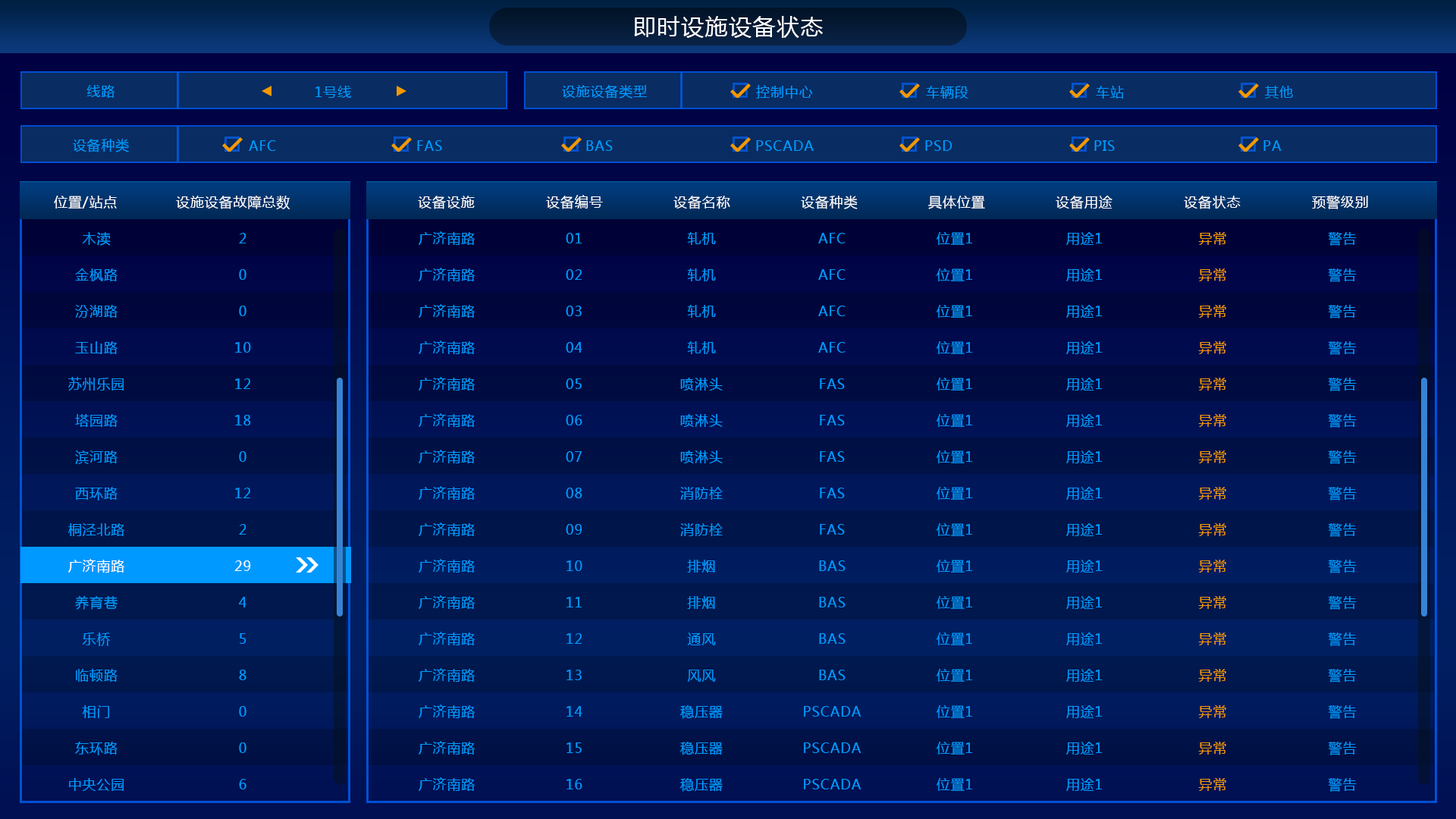
<style>
.page{position:relative;width:1456px;height:819px}
.page>*{position:absolute;margin:0}
.t1{font:22.7px "MicrosoftYaHei";letter-spacing:0.05em;color:#ffffff}
.t2{font:13.6px "MicrosoftYaHei";letter-spacing:0.05em;color:#0099ff}
.t3{font:13.6px "MicrosoftYaHei";letter-spacing:0.05em;color:#ffffff}
.t4{font:13.6px/36.4px "MicrosoftYaHei";letter-spacing:0.05em;color:#0099ff}
.t5{font:13.6px/36.4px "MicrosoftYaHei";letter-spacing:0.05em;color:#ffffff}
.t6{font:13.6px/36.4px "MicrosoftYaHei";letter-spacing:0.05em;color:#f39800}
</style>
<div class="page">
<p class="t1" style="left:634px;top:16px;width:189px;height:22px">即时设施设备状态</p>
<p class="t2" style="left:86px;top:85px;width:29px;height:13px">线路</p>
<p class="t2" style="left:315px;top:86px;width:36px;height:12px">1号线</p>
<p class="t2" style="left:562px;top:85px;width:85px;height:14px">设施设备类型</p>
<p class="t2" style="left:756px;top:85px;width:57px;height:14px">控制中心</p>
<p class="t2" style="left:926px;top:86px;width:42px;height:13px">车辆段</p>
<p class="t2" style="left:1096px;top:86px;width:28px;height:13px">车站</p>
<p class="t2" style="left:1265px;top:86px;width:28px;height:13px">其他</p>
<p class="t2" style="left:73px;top:139px;width:56px;height:13px">设备种类</p>
<p class="t2" style="left:249px;top:140px;width:27px;height:11px">AFC</p>
<p class="t2" style="left:417px;top:140px;width:25px;height:11px">FAS</p>
<p class="t2" style="left:586px;top:140px;width:27px;height:11px">BAS</p>
<p class="t2" style="left:756px;top:140px;width:58px;height:11px">PSCADA</p>
<p class="t2" style="left:925px;top:140px;width:27px;height:11px">PSD</p>
<p class="t2" style="left:1094px;top:140px;width:21px;height:11px">PIS</p>
<p class="t2" style="left:1263px;top:140px;width:19px;height:11px">PA</p>
<p class="t3" style="left:54px;top:196px;width:63px;height:13px">位置/站点</p>
<p class="t3" style="left:176px;top:195px;width:114px;height:14px">设施设备故障总数</p>
<p class="t3" style="left:418px;top:196px;width:57px;height:13px">设备设施</p>
<p class="t3" style="left:546px;top:195px;width:57px;height:14px">设备编号</p>
<p class="t3" style="left:673px;top:196px;width:57px;height:13px">设备名称</p>
<p class="t3" style="left:801px;top:195px;width:57px;height:14px">设备种类</p>
<p class="t3" style="left:928px;top:196px;width:57px;height:13px">具体位置</p>
<p class="t3" style="left:1056px;top:196px;width:56px;height:13px">设备用途</p>
<p class="t3" style="left:1184px;top:196px;width:57px;height:13px">设备状态</p>
<p class="t3" style="left:1312px;top:196px;width:56px;height:13px">预警级别</p>
<p class="t4" style="left:68px;top:232px;width:56px;height:559px;text-align:center">木渎<br>金枫路<br>汾湖路<br>玉山路<br>苏州乐园<br>塔园路<br>滨河路<br>西环路<br>桐泾北路<br><span class="t5">广济南路<br></span>养育巷<br>乐桥<br>临顿路<br>相门<br>东环路<br>中央公园</p>
<p class="t4" style="left:234px;top:233px;width:17px;height:556px;text-align:center">2<br>0<br>0<br>10<br>12<br>18<br>0<br>12<br>2<br><span class="t5">29<br></span>4<br>5<br>8<br>0<br>0<br>6</p>
<p class="t4" style="left:419px;top:231px;width:56px;height:560px;text-align:center">广济南路<br>广济南路<br>广济南路<br>广济南路<br>广济南路<br>广济南路<br>广济南路<br>广济南路<br>广济南路<br>广济南路<br>广济南路<br>广济南路<br>广济南路<br>广济南路<br>广济南路<br>广济南路</p>
<p class="t4" style="left:566px;top:233px;width:16px;height:556px;text-align:center">01<br>02<br>03<br>04<br>05<br>06<br>07<br>08<br>09<br>10<br>11<br>12<br>13<br>14<br>15<br>16</p>
<p class="t4" style="left:680px;top:232px;width:43px;height:560px;text-align:center">轧机<br>轧机<br>轧机<br>轧机<br>喷淋头<br>喷淋头<br>喷淋头<br>消防栓<br>消防栓<br>排烟<br>排烟<br>通风<br>风风<br>稳压器<br>稳压器<br>稳压器</p>
<p class="t4" style="left:804px;top:233px;width:57px;height:556px;text-align:center">AFC<br>AFC<br>AFC<br>AFC<br>FAS<br>FAS<br>FAS<br>FAS<br>FAS<br>BAS<br>BAS<br>BAS<br>BAS<br>PSCADA<br>PSCADA<br>PSCADA</p>
<p class="t4" style="left:937px;top:232px;width:36px;height:559px;text-align:center">位置1<br>位置1<br>位置1<br>位置1<br>位置1<br>位置1<br>位置1<br>位置1<br>位置1<br>位置1<br>位置1<br>位置1<br>位置1<br>位置1<br>位置1<br>位置1</p>
<p class="t4" style="left:1066px;top:232px;width:37px;height:559px;text-align:center">用途1<br>用途1<br>用途1<br>用途1<br>用途1<br>用途1<br>用途1<br>用途1<br>用途1<br>用途1<br>用途1<br>用途1<br>用途1<br>用途1<br>用途1<br>用途1</p>
<p class="t6" style="left:1198px;top:232px;width:28px;height:559px;text-align:center">异常<br>异常<br>异常<br>异常<br>异常<br>异常<br>异常<br>异常<br>异常<br>异常<br>异常<br>异常<br>异常<br>异常<br>异常<br>异常</p>
<p class="t4" style="left:1328px;top:232px;width:29px;height:560px;text-align:center">警告<br>警告<br>警告<br>警告<br>警告<br>警告<br>警告<br>警告<br>警告<br>警告<br>警告<br>警告<br>警告<br>警告<br>警告<br>警告</p>
</div>
